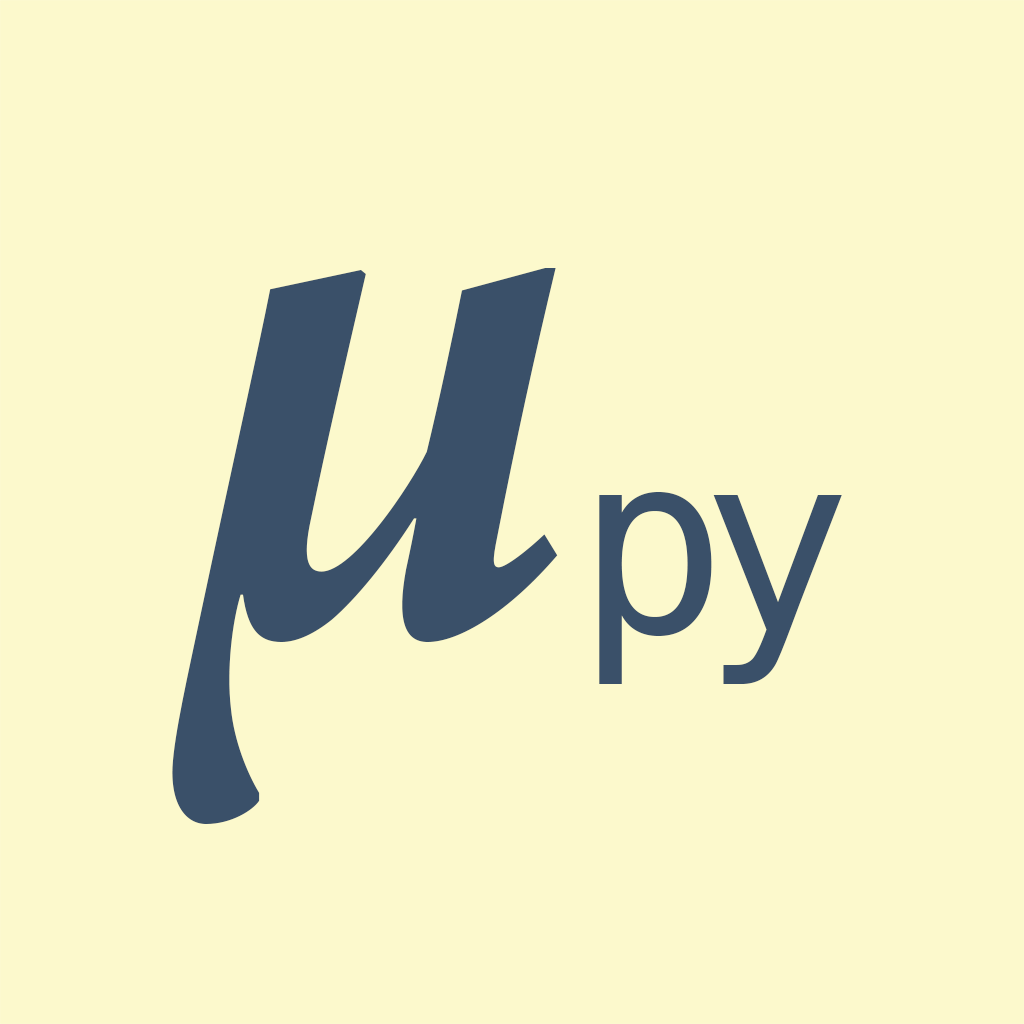
<style>
.page{position:relative;width:1024px;height:1024px;background:#fcf9cc}
.page>*{position:absolute;margin:0}
.t1{font:250px "Menlo-Regular";letter-spacing:-0.1em;color:#3a5069}
.t2{font:800px "MinionPro-BoldCnIt";color:#3a5069}
</style>
<div class="page">
<p class="t1" style="left:172px;top:268px;width:670px;height:556px"><span class="t2">μ</span>py</p>
</div>
